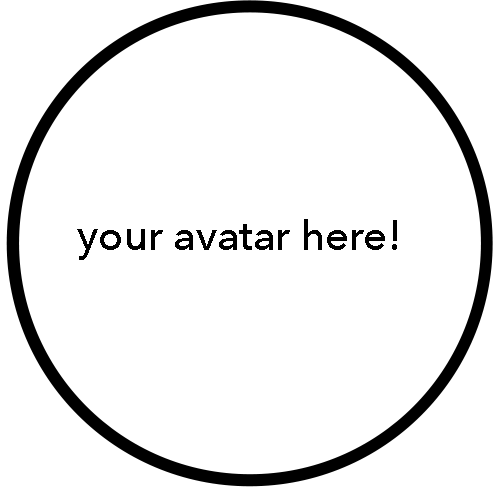
<style>
.page{position:relative;width:500px;height:500px;background:#ffffff}
.page>*{position:absolute;margin:0}
.t1{font:41.7px "AvenirNext-Medium";color:#000000}
</style>
<div class="page">
<p class="t1" style="left:77px;top:219px;width:320px;height:41px">your avatar here!</p>
</div>
